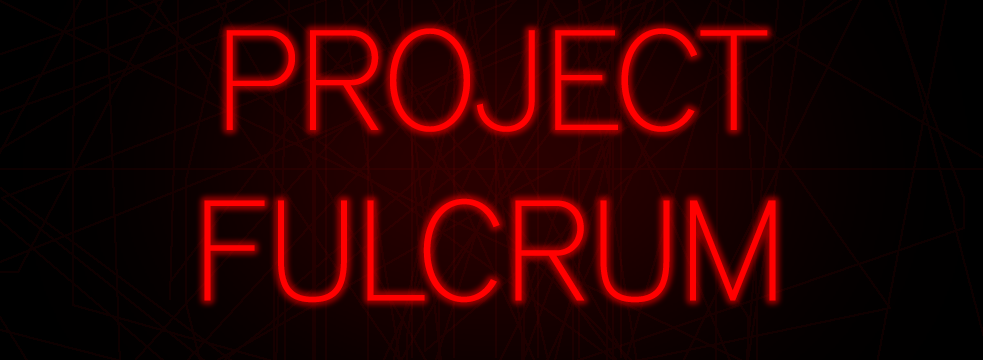
<style>
.page{position:relative;width:983px;height:360px}
.page>*{position:absolute;margin:0}
.t1{font:142px "DistrictPro-Thin";color:#ff0000}
</style>
<div class="page">
<p class="t1" style="left:204px;top:28px;width:572px;height:275px;text-align:center">PROJECT<br>FULCRUM</p>
</div>
